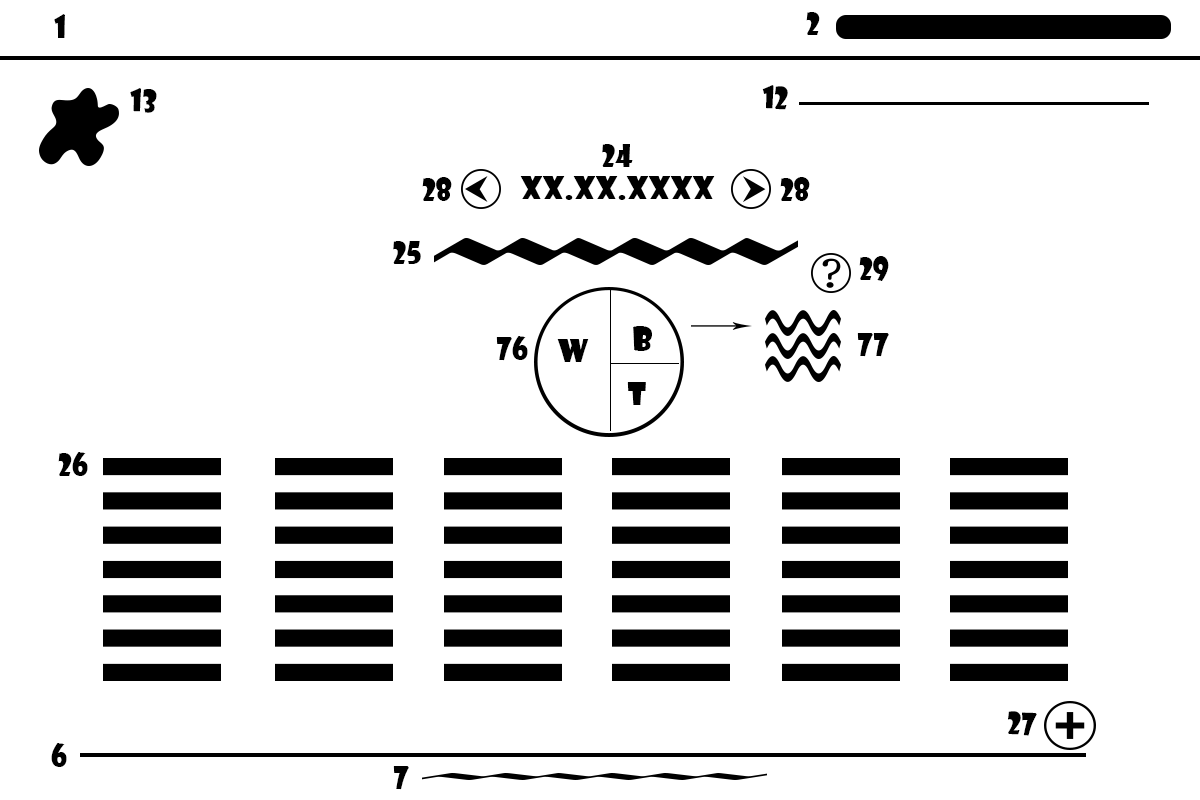
<style>
.page{position:relative;width:1200px;height:800px;background:#ffffff}
.page>*{position:absolute;margin:0}
.t1{font:30px "ShowcardGothic-Reg";color:#000000}
</style>
<div class="page">
<p class="t1" style="left:54px;top:14px;width:11px;height:24px">1</p>
<p class="t1" style="left:806px;top:12px;width:14px;height:23px">2</p>
<p class="t1" style="left:130px;top:88px;width:27px;height:25px;rotate:2deg">13</p>
<p class="t1" style="left:762px;top:85px;width:26px;height:25px;rotate:2deg">12</p>
<p class="t1" style="left:602px;top:144px;width:31px;height:23px">24</p>
<p class="t1" style="left:422px;top:177px;width:30px;height:24px">28</p>
<p class="t1" style="left:520px;top:176px;width:195px;height:24px">xx.xx.xxxx</p>
<p class="t1" style="left:780px;top:177px;width:30px;height:24px">28</p>
<p class="t1" style="left:393px;top:241px;width:28px;height:23px">25</p>
<p class="t1" style="left:859px;top:256px;width:30px;height:25px">29</p>
<p class="t1" style="left:633px;top:326px;width:19px;height:25px">B</p>
<p class="t1" style="left:496px;top:336px;width:32px;height:25px">76</p>
<p class="t1" style="left:557px;top:339px;width:32px;height:23px">w</p>
<p class="t1" style="left:857px;top:333px;width:32px;height:24px">77</p>
<p class="t1" style="left:627px;top:382px;width:19px;height:23px">T</p>
<p class="t1" style="left:58px;top:452px;width:30px;height:24px">26</p>
<p class="t1" style="left:1008px;top:711px;width:29px;height:25px;rotate:2deg">27</p>
<p class="t1" style="left:51px;top:743px;width:16px;height:24px">6</p>
<p class="t1" style="left:393px;top:766px;width:16px;height:24px">7</p>
</div>
